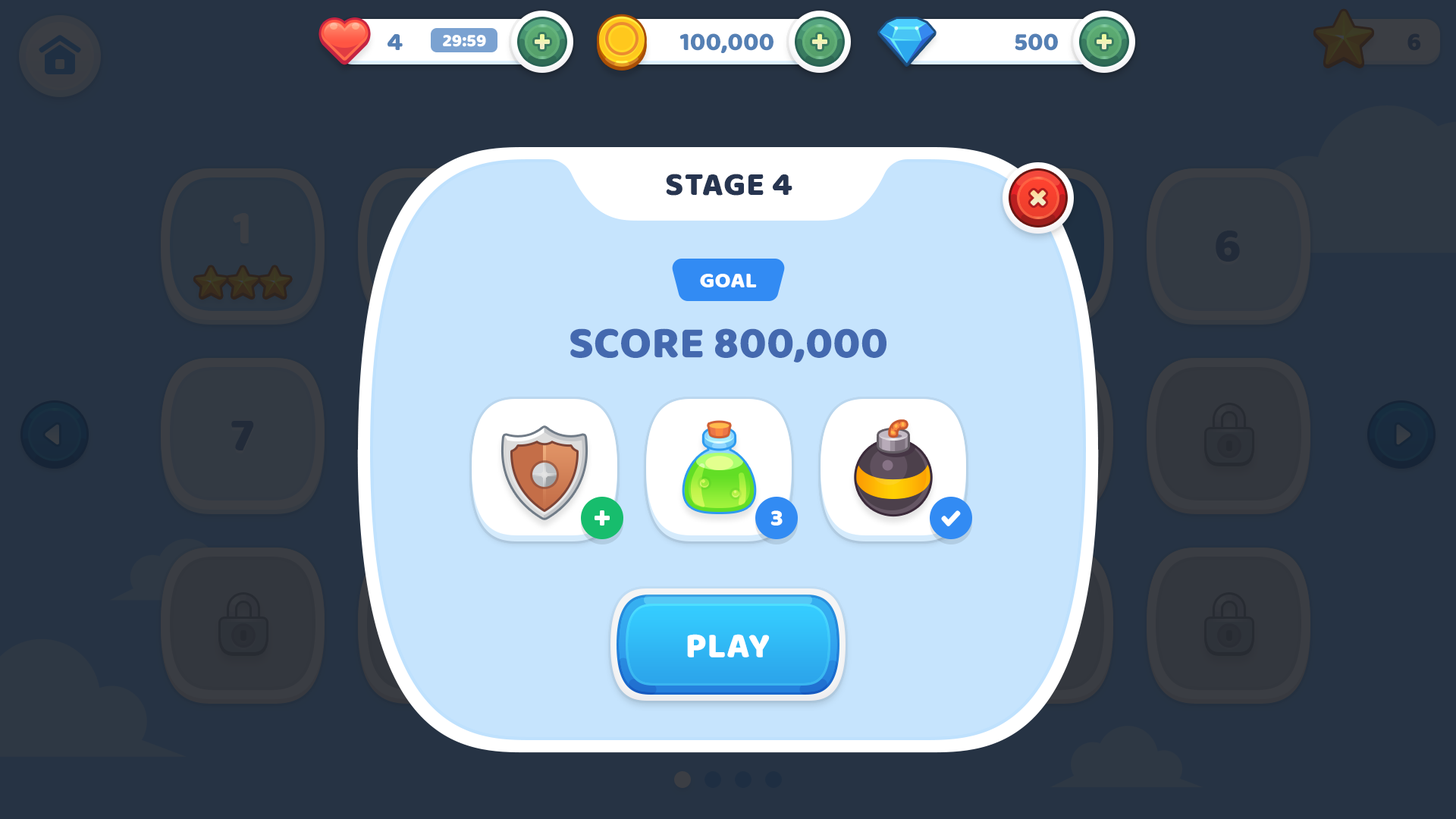
<style>
.page{position:relative;width:1456px;height:819px;background:#263344}
.page>*{position:absolute;margin:0}
.t1{font:25.8px "BalooBhaijaan-Regular";color:#5580b4;text-transform:uppercase}
.t2{font:18.2px "BalooBhaijaan-Regular";color:#ffffff;text-transform:uppercase}
.t3{font:33.4px "BalooBhaijaan-Regular";color:#273550;text-transform:uppercase}
.t4{font:22.7px "BalooBhaijaan-Regular";color:#ffffff;text-transform:uppercase}
.t5{font:45.5px "BalooBhaijaan-Regular";color:#4469af;text-transform:uppercase}
.t6{font:24.3px "BalooBhaijaan-Regular";color:#ffffff}
.t7{font:36.4px "BalooBhaijaan-Regular";color:#ffffff;text-transform:uppercase}
</style>
<div class="page">
<p class="t1" style="left:388px;top:33px;width:15px;height:17px">4</p>
<p class="t2" style="left:443px;top:35px;width:43px;height:12px">29:59</p>
<p class="t1" style="left:679px;top:33px;width:94px;height:20px">100,000</p>
<p class="t1" style="left:1015px;top:33px;width:43px;height:18px">500</p>
<p class="t3" style="left:666px;top:174px;width:126px;height:22px">stage 4</p>
<p class="t4" style="left:700px;top:274px;width:57px;height:13px">goal</p>
<p class="t5" style="left:570px;top:328px;width:316px;height:34px">score 800,000</p>
<p class="t6" style="left:770px;top:510px;width:13px;height:16px">3</p>
<p class="t7" style="left:687px;top:634px;width:83px;height:23px">play</p>
</div>
